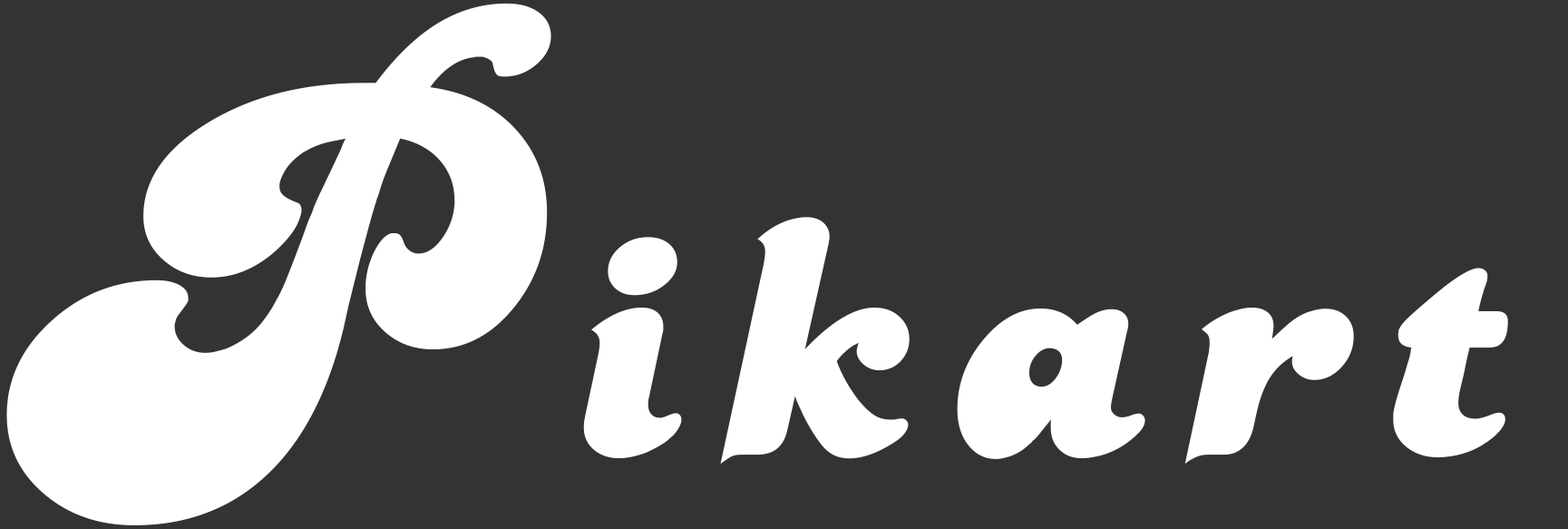
<style>
.page{position:relative;width:1568px;height:529px;background:#333333}
.page>*{position:absolute;margin:0}
.t1{font:377.9px "Candice";letter-spacing:0.1em;color:#ffffff}
.t2{font:566.8px "Candice";letter-spacing:0.1em;color:#ffffff}
</style>
<div class="page">
<p class="t1" style="left:6px;top:3px;width:1502px;height:522px"><span class="t2">P</span>ikart</p>
</div>
